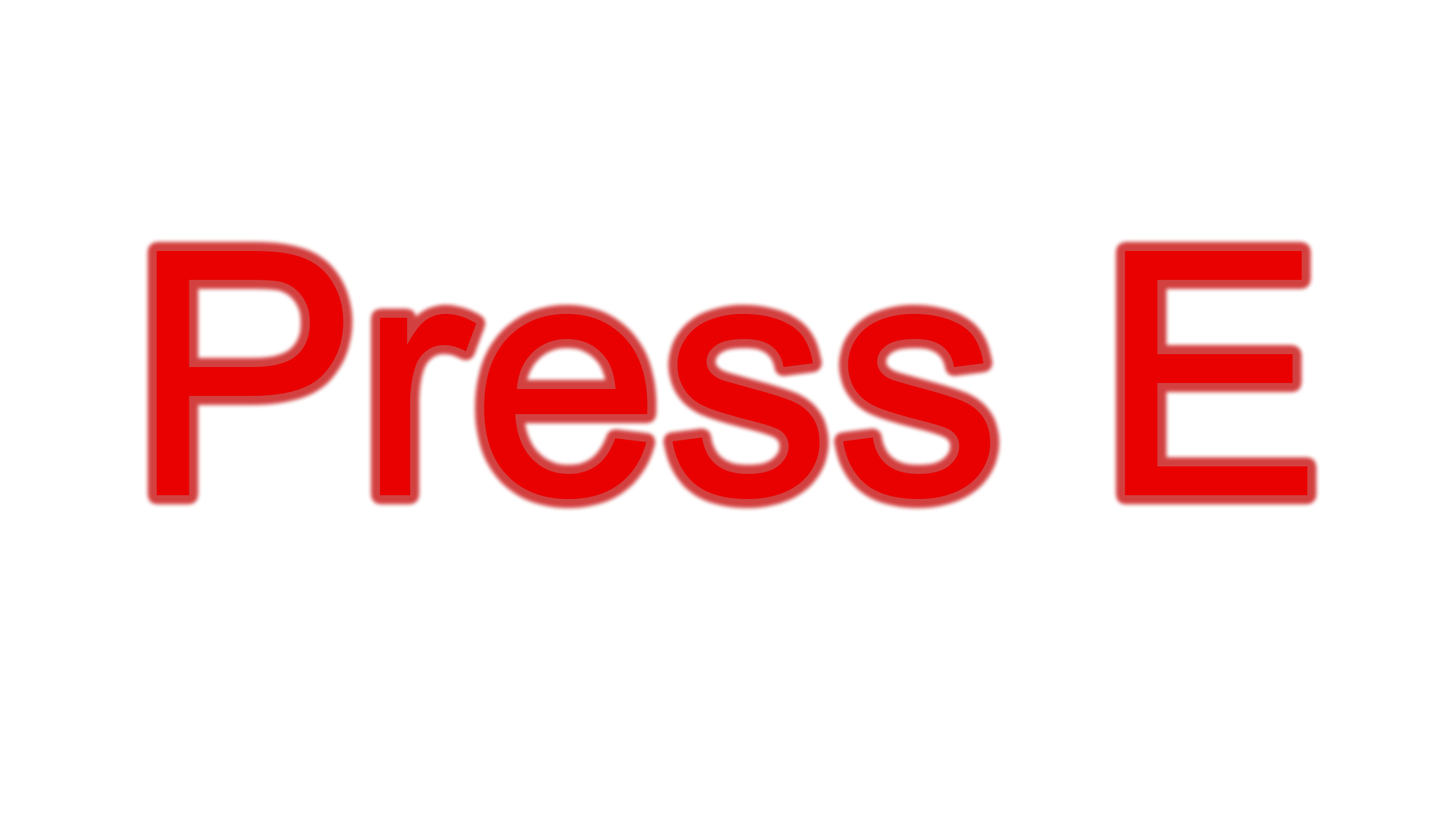
<style>
.page{position:relative;width:1456px;height:819px;background:#ffffff}
.page>*{position:absolute;margin:0}
.t1{font:341.2px "ArialMT";color:#e90000}
</style>
<div class="page">
<p class="t1" style="left:156px;top:251px;width:1151px;height:248px">Press E</p>
</div>
